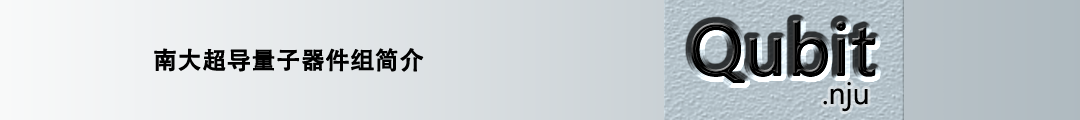
<style>
.page{position:relative;width:1080px;height:120px}
.page>*{position:absolute;margin:0}
.t1{font:24px "AdobeHeitiStd-Regular";color:#000000;font-weight:bold}
</style>
<div class="page">
<p class="t1" style="left:154px;top:48px;width:270px;height:24px">南大超导量子器件组简介</p>
</div>
